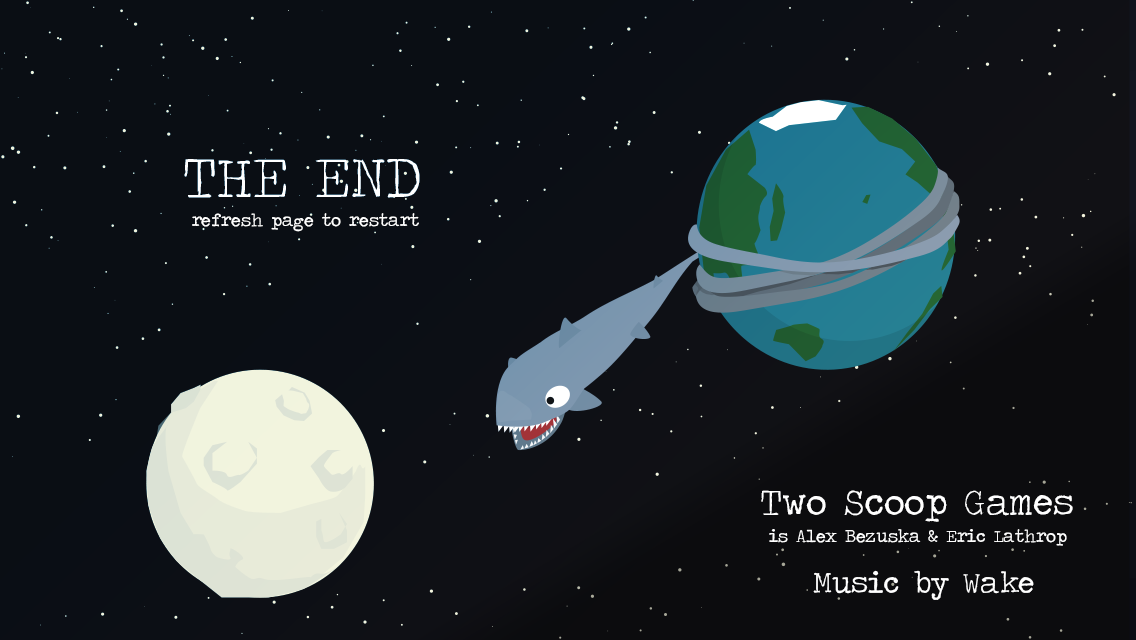
<style>
.page{position:relative;width:1136px;height:640px;background:#0a0e14}
.page>*{position:absolute;margin:0}
.t1{font:59px "TravelingTypewriter";color:#ffffff}
.t2{font:18px "TravelingTypewriter";color:#ffffff}
.t3{font:30.6px "TravelingTypewriter";color:#ffffff}
</style>
<div class="page">
<p class="t1" style="left:184px;top:159px;width:236px;height:39px">THE END</p>
<p class="t2" style="left:192px;top:213px;width:227px;height:19px">refresh page to restart</p>
<p class="t2" style="left:769px;top:529px;width:298px;height:17px">is Alex Bezuska &amp; Eric Lathrop</p>
<p class="t3" style="left:813px;top:570px;width:221px;height:30px">Music by Wake</p>
</div>
